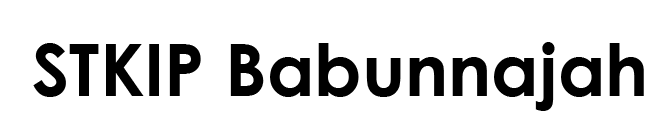
<style>
.page{position:relative;width:672px;height:136px;background:#ffffff}
.page>*{position:absolute;margin:0}
.t1{font:72px "CenturyGothic-Bold";color:#000000}
</style>
<div class="page">
<p class="t1" style="left:33px;top:42px;width:611px;height:69px">STKIP Babunnajah</p>
</div>
